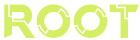
<style>
.page{position:relative;width:140px;height:40px;background:#ffffff}
.page>*{position:absolute;margin:0}
.t1{font:50px "OriginTechDemoRegular";color:#d4ef63}
</style>
<div class="page">
<p class="t1" style="left:4px;top:4px;width:135px;height:34px">root</p>
</div>
